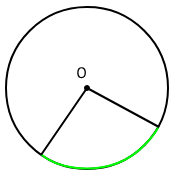
<style>
.page{position:relative;width:174px;height:176px;background:#ffffff}
.page>*{position:absolute;margin:0}
.t1{font:15.2px "PTSans-Regular";color:#000000}
</style>
<div class="page">
<p class="t1" style="left:77px;top:67px;width:9px;height:12px">O</p>
</div>
